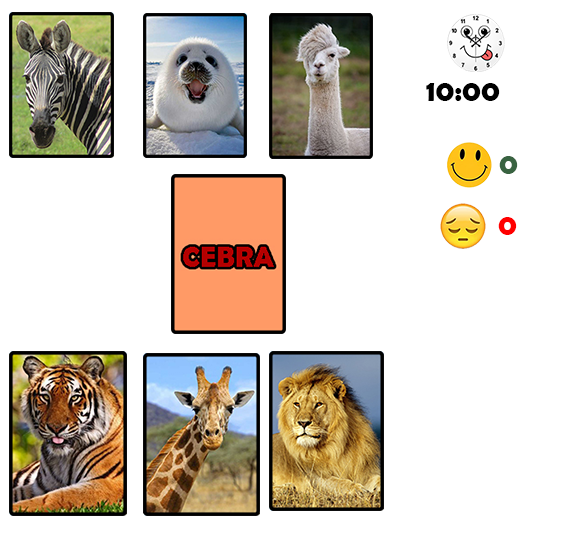
<style>
.page{position:relative;width:566px;height:558px;background:#ffffff}
.page>*{position:absolute;margin:0}
.t1{font:30px "BerlinSansFBDemi-Bold";color:#000000}
.t2{font:30px "BerlinSansFBDemi-Bold";color:#396341}
.t3{font:30px "BerlinSansFBDemi-Bold";color:#ff0000}
</style>
<div class="page">
<p class="t1" style="left:426px;top:83px;width:74px;height:18px">10:00</p>
<p class="t2" style="left:499px;top:156px;width:19px;height:18px">0</p>
<p class="t3" style="left:498px;top:217px;width:19px;height:18px">0</p>
</div>
